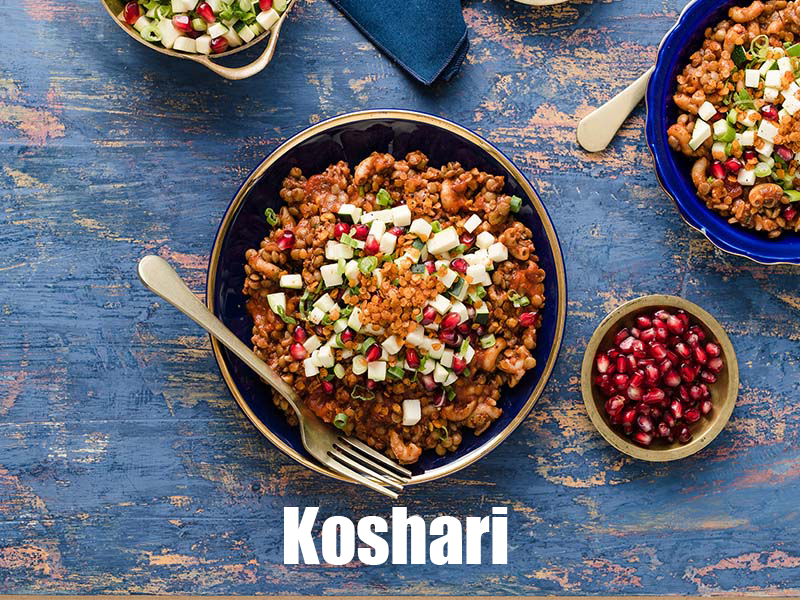
<style>
.page{position:relative;width:800px;height:600px}
.page>*{position:absolute;margin:0}
.t1{font:72px "Impact";color:#ffffff}
</style>
<div class="page">
<p class="t1" style="left:284px;top:507px;width:224px;height:58px">Koshario</p>
</div>
